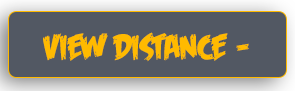
<style>
.page{position:relative;width:295px;height:91px;background:#525863}
.page>*{position:absolute;margin:0}
.t1{font:36px "FeastofFleshBB";color:#ffba00;text-transform:uppercase}
</style>
<div class="page">
<p class="t1" style="left:43px;top:32px;width:206px;height:30px">View Distance -</p>
</div>
